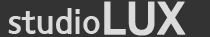
<style>
.page{position:relative;width:210px;height:37px;background:#333333}
.page>*{position:absolute;margin:0}
.t1{font:34.1px "10X10Bold";letter-spacing:0.005em;color:#dbdbdb;scale:0.92 1}
.t2{font:45.4px "Helvetica65-Medium";letter-spacing:0.005em;color:#dbdbdb;font-weight:bold;scale:0.92 1}
</style>
<div class="page">
<p class="t1" style="left:8px;top:1px;width:178px;height:35px">studio<span class="t2">LUX</span></p>
</div>
